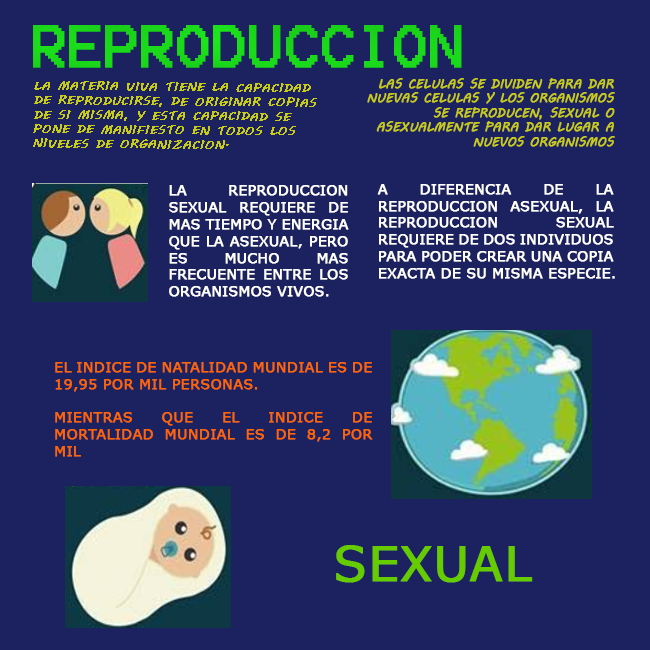
<style>
.page{position:relative;width:650px;height:650px;background:#1b225f}
.page>*{position:absolute;margin:0}
.t1{font:12px "MVBoli";color:#c9cb19;text-transform:uppercase;font-weight:bold}
.t2{font:14px "Verdana";color:#ffffff;text-transform:uppercase;font-weight:bold}
.t3{font:14px "Verdana";color:#ff6600;text-transform:uppercase;font-weight:bold}
.t4{font:48.2px "Verdana";color:#66cc00;text-transform:uppercase;font-weight:bold}
</style>
<div class="page">
<p class="t1" style="left:367px;top:78px;width:248px;height:69px;text-align:right">las celulas se dividen para dar nuevas celulas y los organismos se reproducen, sexual o asexualmente para dar lugar a nuevos organismos</p>
<p class="t1" style="left:33px;top:81px;width:284px;height:68px;rotate:1deg">La materia viva tiene la capacidad de reproducirse, de originar copias de si misma, y esta capacidad se pone de manifiesto en todos los niveles de organizacion.</p>
<p class="t2" style="left:169px;top:185px;width:180px;height:112px;text-align:justify">La reproduccion sexual requiere de mas tiempo y energia que la asexual, pero es mucho mas frecuente entre los organismos vivos.</p>
<p class="t2" style="left:377px;top:184px;width:238px;height:95px;text-align:justify">A diferencia de la reproduccion asexual, la reproduccion sexual requiere de dos individuos para poder crear una copia exacta de su misma especie.</p>
<p class="t3" style="left:55px;top:362px;width:318px;height:95px;text-align:justify">el indice de natalidad mundial es de 19,95 por mil personas.<br><br>mientras que el indice de mortalidad mundial es de 8,2 por mil</p>
<p class="t4" style="left:336px;top:545px;width:197px;height:38px">SExual</p>
</div>
